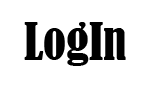
<style>
.page{position:relative;width:150px;height:90px;background:#ffffff}
.page>*{position:absolute;margin:0}
.t1{font:48px "BernardMT-Condensed";color:#000000}
</style>
<div class="page">
<p class="t1" style="left:24px;top:22px;width:102px;height:44px">LogIn</p>
</div>
